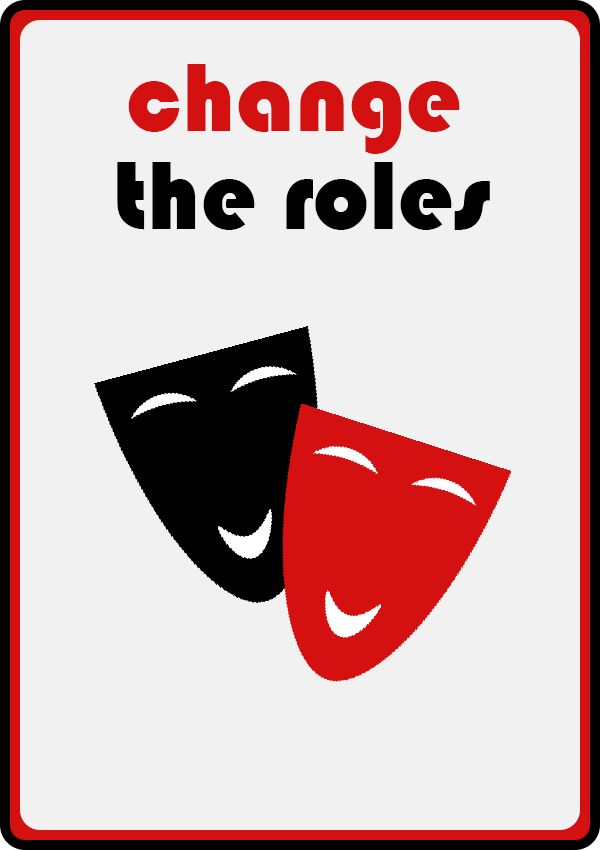
<style>
.page{position:relative;width:600px;height:850px;background:#f1f1f1}
.page>*{position:absolute;margin:0}
.t1{font:100px "Bauhaus93";color:#d41111}
.t2{font:100px "Bauhaus93";color:#000000}
</style>
<div class="page">
<p class="t1" style="left:128px;top:64px;width:332px;height:90px">change</p>
<p class="t2" style="left:117px;top:162px;width:373px;height:68px">the roles</p>
</div>
